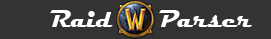
<style>
.page{position:relative;width:271px;height:39px;background:#333333}
.page>*{position:absolute;margin:0}
.t1{font:25px "Magneto-Bold";color:#ffffff}
</style>
<div class="page">
<p class="t1" style="left:50px;top:10px;width:202px;height:17px">Raid  Parser</p>
</div>
